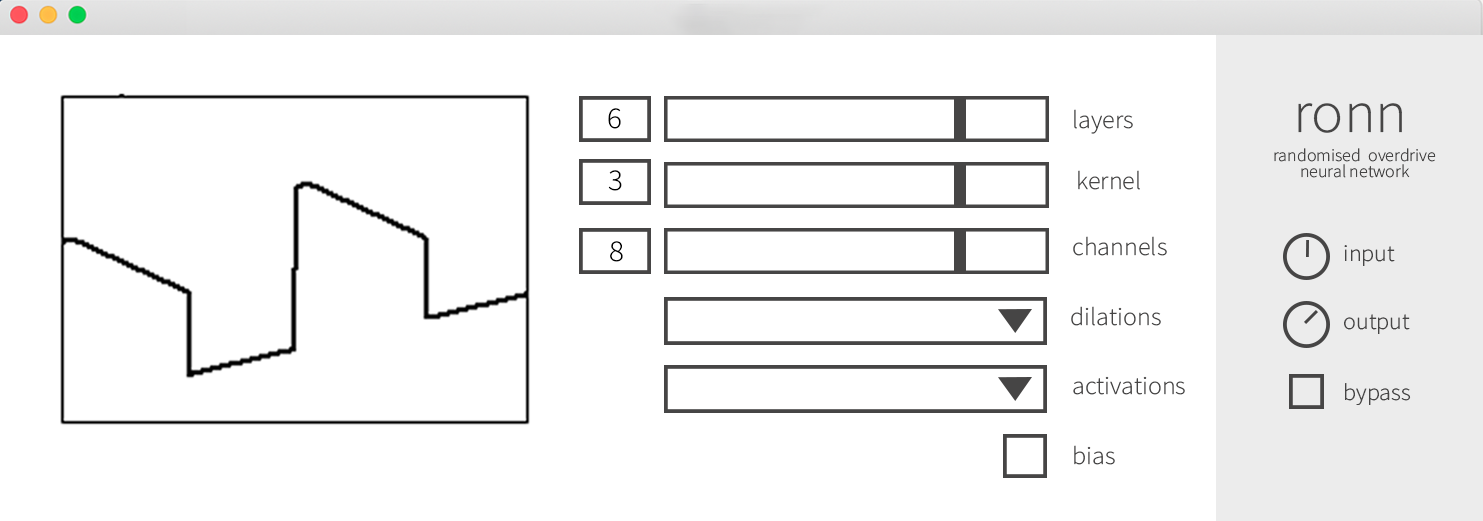
<style>
.page{position:relative;width:1483px;height:521px;background:#ffffff}
.page>*{position:absolute;margin:0}
.t1{font:30.1px "SourceSansRoman-Light";color:#000000;scale:1.03 1}
.t2{font:25.2px "SourceSansRoman-Light";color:#464545;scale:1.03 1}
.t3{font:58.2px "SourceSansRoman-Light";color:#464545;scale:1.03 1}
.t4{font:17.5px/16px "SourceSansRoman-Light";color:#464545;scale:1.03 1}
.t5{font:23.3px "SourceSansRoman-Light";color:#464545;scale:1.03 1}
</style>
<div class="page">
<p class="t1" style="left:608px;top:108px;width:13px;height:21px">6</p>
<p class="t2" style="left:1074px;top:109px;width:59px;height:25px">layers</p>
<p class="t3" style="left:1298px;top:103px;width:104px;height:30px">ronn</p>
<p class="t4" style="left:1274px;top:148px;width:162px;height:30px;text-align:center">randomised  overdrive <br>neural network</p>
<p class="t1" style="left:608px;top:170px;width:14px;height:21px">3</p>
<p class="t2" style="left:1078px;top:170px;width:62px;height:20px">kernel</p>
<p class="t1" style="left:610px;top:241px;width:13px;height:21px">8</p>
<p class="t2" style="left:1073px;top:236px;width:94px;height:20px">channels</p>
<p class="t5" style="left:1344px;top:245px;width:51px;height:21px">input</p>
<p class="t2" style="left:1071px;top:306px;width:90px;height:20px">dilations</p>
<p class="t5" style="left:1344px;top:314px;width:66px;height:20px">output</p>
<p class="t2" style="left:1073px;top:376px;width:112px;height:19px">activations</p>
<p class="t5" style="left:1345px;top:383px;width:66px;height:22px">bypass</p>
<p class="t2" style="left:1074px;top:445px;width:41px;height:20px">bias</p>
</div>
